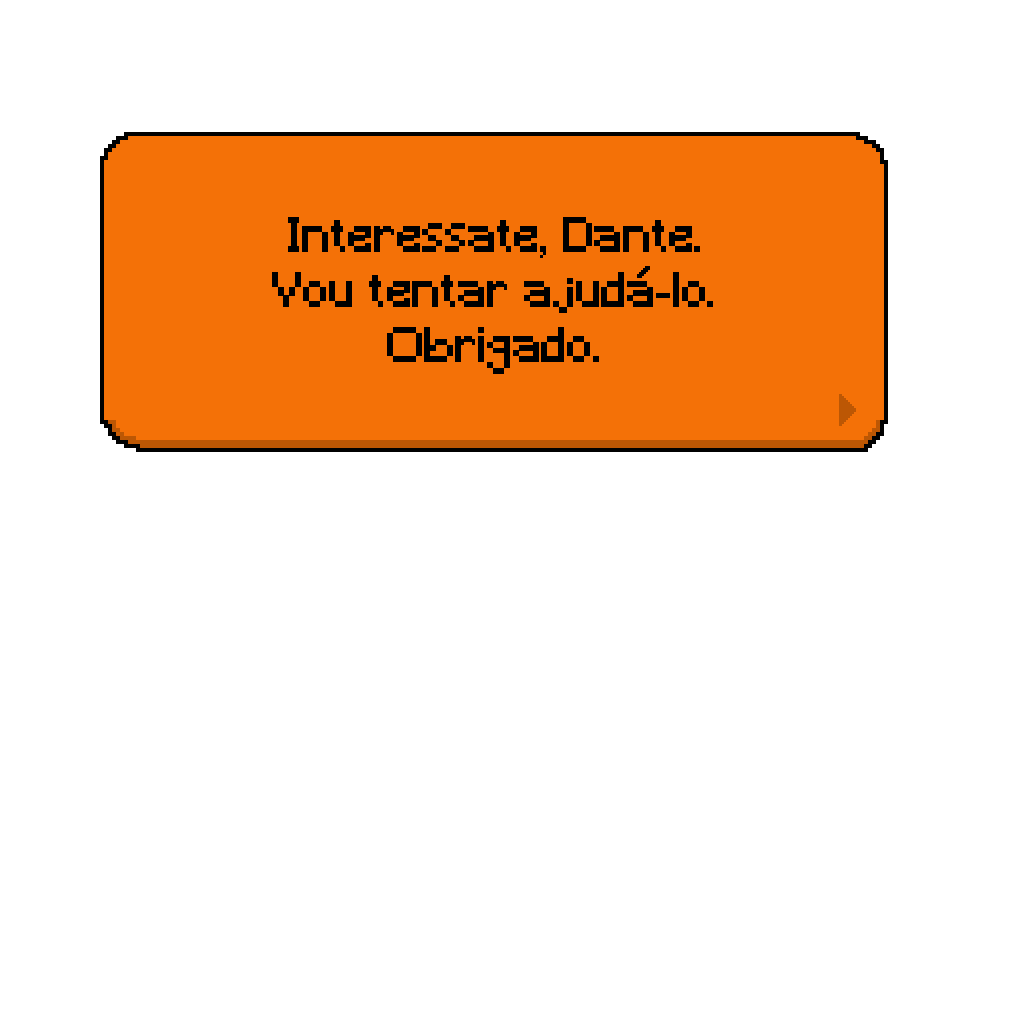
<style>
.page{position:relative;width:1024px;height:1024px;background:#ffffff}
.page>*{position:absolute;margin:0}
.t1{font:45.8px "Minecraft";color:#000000}
</style>
<div class="page">
<p class="t1" style="left:272px;top:217px;width:441px;height:157px;text-align:center">Interessate, Dante.<br>Vou tentar ajuda-lo. Obrigado.</p>
</div>
